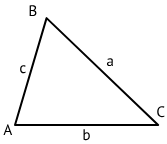
<style>
.page{position:relative;width:167px;height:144px;background:#ffffff}
.page>*{position:absolute;margin:0}
.t1{font:15.2px "PTSans-Regular";color:#000000}
</style>
<div class="page">
<p class="t1" style="left:29px;top:5px;width:8px;height:12px">B</p>
<p class="t1" style="left:20px;top:65px;width:6px;height:9px">c</p>
<p class="t1" style="left:106px;top:58px;width:7px;height:9px">a</p>
<p class="t1" style="left:157px;top:106px;width:8px;height:12px">C</p>
<p class="t1" style="left:3px;top:124px;width:10px;height:11px">A</p>
<p class="t1" style="left:83px;top:129px;width:7px;height:12px">b</p>
</div>
